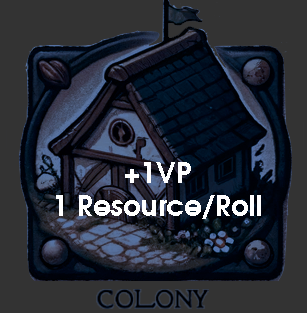
<style>
.page{position:relative;width:307px;height:313px;background:#333333}
.page>*{position:absolute;margin:0}
.t1{font:28px "AvantGardeLT-Demi";color:#ffffff}
</style>
<div class="page">
<p class="t1" style="left:56px;top:162px;width:205px;height:57px;text-align:center">+1VP<br>1 Resource/Roll</p>
</div>
